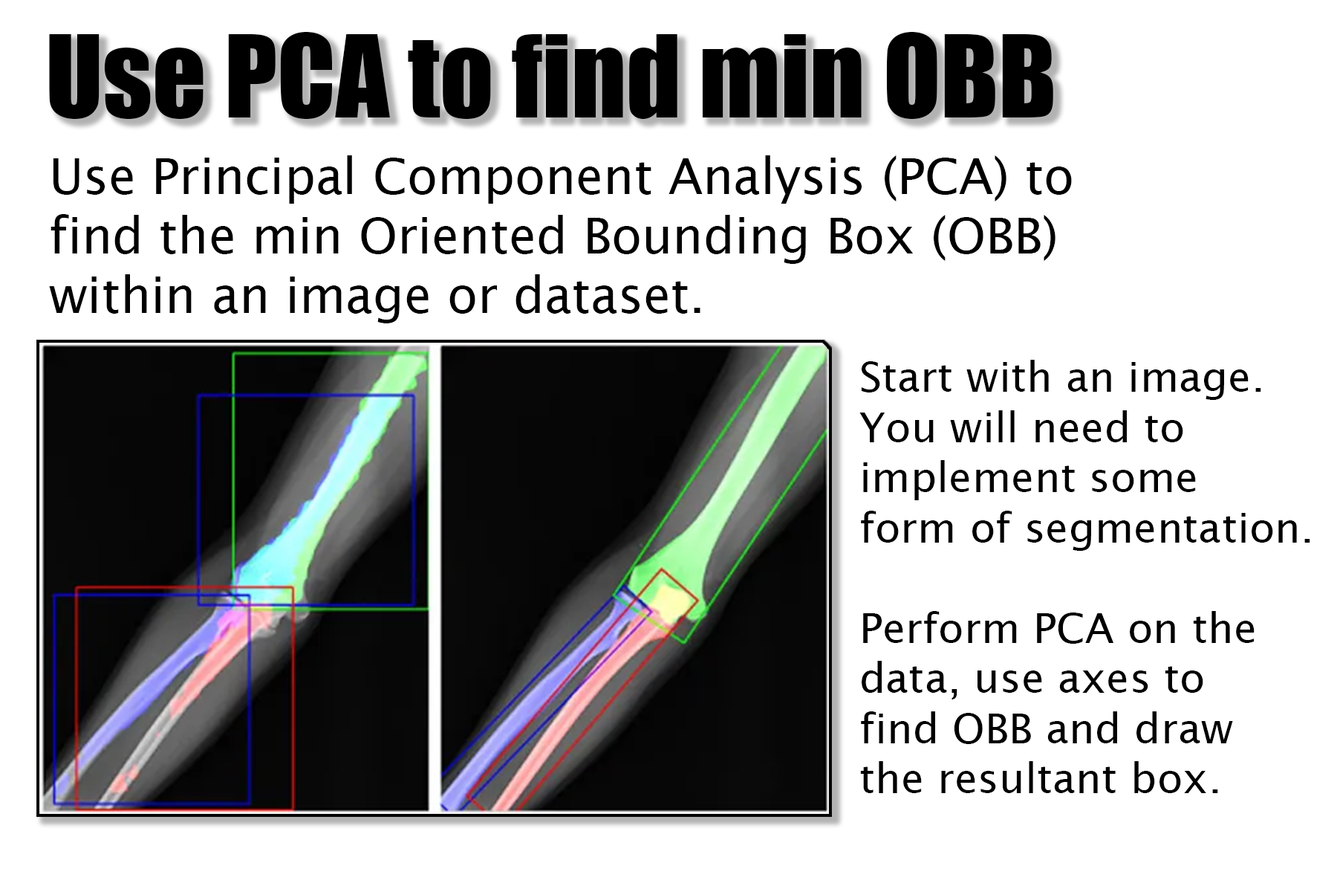
<style>
.page{position:relative;width:1337px;height:892px;background:#ffffff}
.page>*{position:absolute;margin:0}
.t1{font:105.3px "Impact";color:#000000}
.t2{font:49.5px "LucidaSans";color:#000000}
.t3{font:41.8px "LucidaSans";color:#000000}
</style>
<div class="page">
<p class="t1" style="left:49px;top:32px;width:1005px;height:87px">Use PCA to find min OBB</p>
<p class="t2" style="left:49px;top:155px;width:1023px;height:168px">Use Principal Component Analysis (PCA) to <br>find the min Oriented Bounding Box (OBB)<br>within an image or dataset.</p>
<p class="t3" style="left:860px;top:360px;width:451px;height:433px">Start with an image.<br>You will need to<br>implement some<br>form of segmentation.<br><br>Perform PCA on the<br>data, use axes to <br>find OBB and draw <br>the resultant box.</p>
</div>
